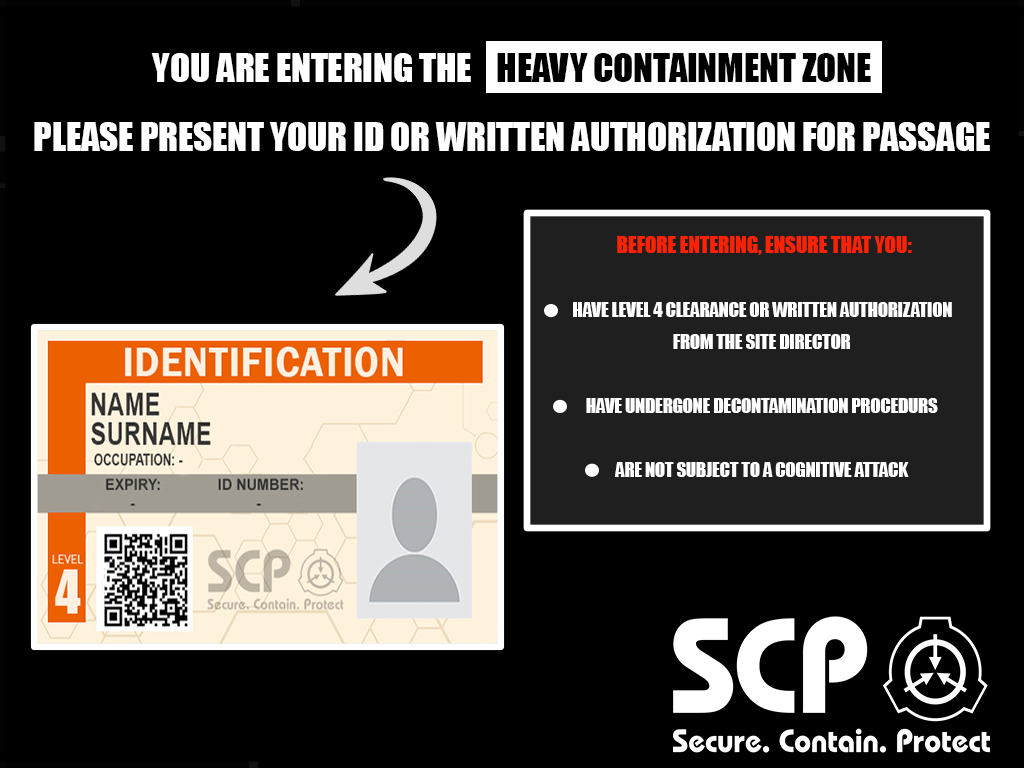
<style>
.page{position:relative;width:1024px;height:768px;background:#000000}
.page>*{position:absolute;margin:0}
.t1{font:37.3px/69.4px "Impact";letter-spacing:-0.01em;color:#ffffff;text-transform:uppercase}
.t2{font:37.3px/69.4px "Impact";letter-spacing:-0.01em;color:#000000;text-transform:uppercase}
.t3{font:18.7px/32px "Impact";letter-spacing:-0.01em;color:#ffffff;text-transform:uppercase}
.t4{font:21.3px/32px "Impact";letter-spacing:-0.01em;color:#df2d11;text-transform:uppercase}
.t5{font:21.3px/32px "Impact";letter-spacing:-0.01em;color:#ff2200;text-transform:uppercase}
</style>
<div class="page">
<p class="t1" style="left:34px;top:53px;width:956px;height:98px;text-align:center">You are entering the    <span class="t2">Heavy Containment Zone<br></span>Please present your ID or written authorization for passage</p>
<p class="t3" style="left:573px;top:236px;width:379px;height:241px;text-align:center"><span class="t4">    </span><span class="t5">Before entering, ensure that you:<br><br>   </span>have Level 4 clearance or written authorization <br>   from the Site Director<br><br>   have undergone decontamination procedurs<br><br>   are not subject to a cognitive attack</p>
</div>
